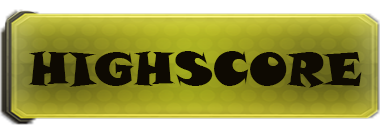
<style>
.page{position:relative;width:380px;height:125px}
.page>*{position:absolute;margin:0}
.t1{font:45.8px "SnapITC-Regular";color:#0e0a02}
</style>
<div class="page">
<p class="t1" style="left:28px;top:51px;width:334px;height:37px">HIGHSCORE</p>
</div>
